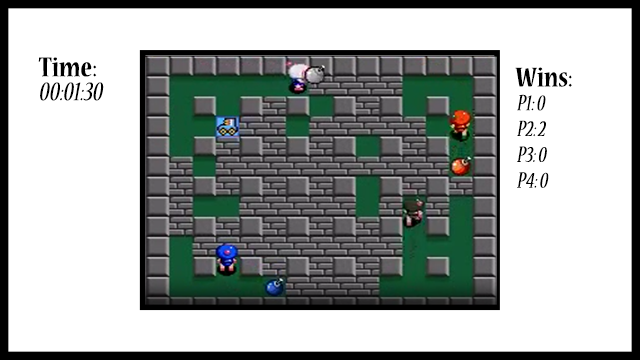
<style>
.page{position:relative;width:640px;height:360px;background:#ffffff}
.page>*{position:absolute;margin:0}
.t1{font:30px "NuevaStd-BoldCond";color:#000000}
.t2{font:30px "NuevaStd-CondItalic";color:#000000}
.t3{font:25px/17.5px "NuevaStd-CondItalic";color:#000000}
</style>
<div class="page">
<p class="t1" style="left:38px;top:57px;width:59px;height:20px">Time:</p>
<p class="t1" style="left:515px;top:67px;width:57px;height:20px">Wins:</p>
<p class="t2" style="left:40px;top:82px;width:64px;height:19px">00:01:30</p>
<p class="t3" style="left:517px;top:94px;width:32px;height:94px">P1: 0<br>P2: 2<br>P3: 0<br>P4: 0</p>
</div>
